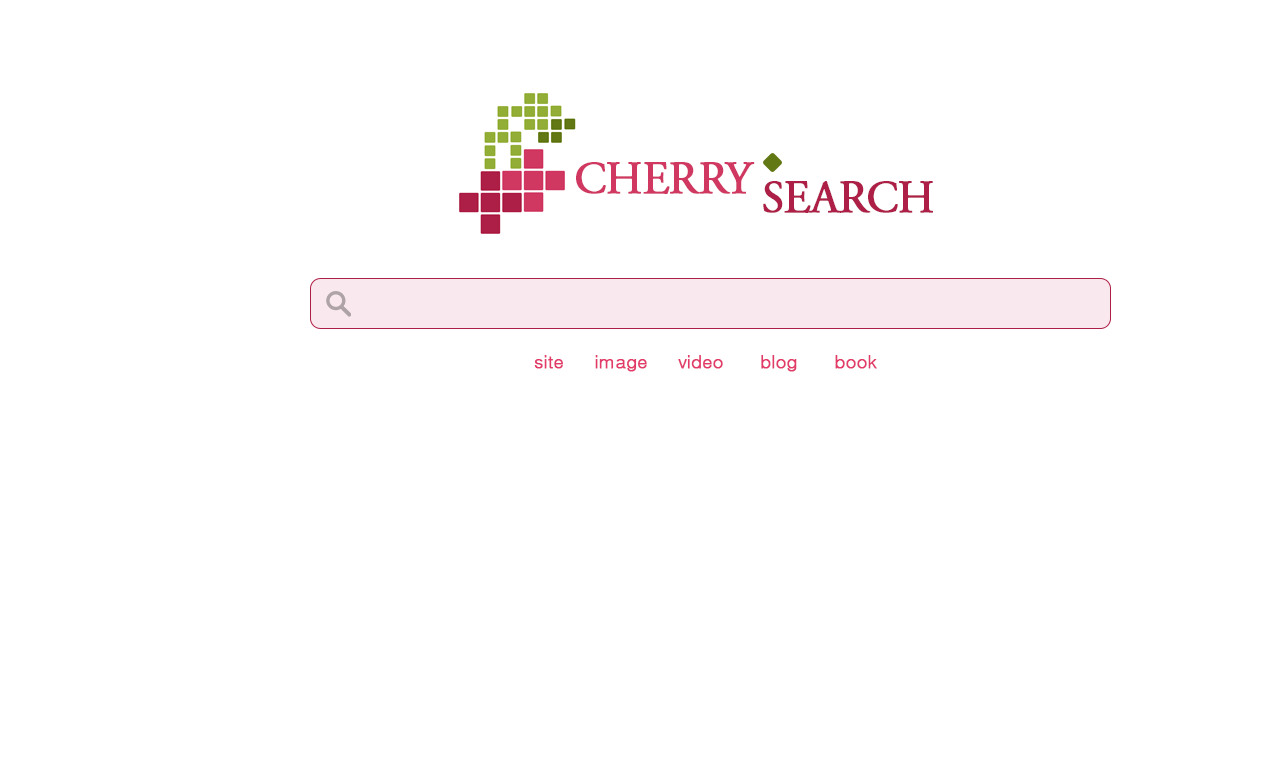
<style>
.page{position:relative;width:1280px;height:768px;background:#ffffff}
.page>*{position:absolute;margin:0}
.t1{font:45.3px "AGaramondPro-Regular";letter-spacing:-0.025em;color:#d03862;font-weight:bold}
.t2{font:45.3px "AGaramondPro-Regular";letter-spacing:-0.025em;color:#ad1f46;font-weight:bold}
.t3{font:18.3px "Dotum";letter-spacing:-0.025em;color:#e23b69;font-weight:bold}
</style>
<div class="page">
<p class="t1" style="left:576px;top:162px;width:179px;height:32px">CHERRY</p>
<p class="t2" style="left:763px;top:181px;width:170px;height:32px">SEARCH</p>
<p class="t3" style="left:534px;top:355px;width:343px;height:17px">site     image     video      blog      book</p>
</div>
